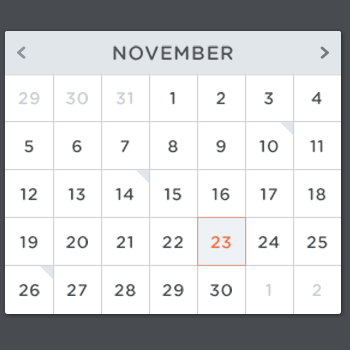
<style>
.page{position:relative;width:350px;height:350px;background:#ffffff}
.page>*{position:absolute;margin:0}
.t1{font:19.2px "GothamRounded-Medium";letter-spacing:0.03em;color:#4d5155;text-transform:uppercase}
.t2{font:16.8px/48px "GothamRounded-Medium";letter-spacing:0.03em;color:#4d5155;text-transform:uppercase}
.t3{font:16.8px/48px "GothamRounded-Medium";letter-spacing:0.03em;color:#cccfd3;text-transform:uppercase}
.t4{font:16.8px/48px "GothamRounded-Medium";letter-spacing:0.03em;color:#ef733c;text-transform:uppercase}
</style>
<div class="page">
<p class="t1" style="left:113px;top:45px;width:120px;height:16px">November</p>
<p class="t2" style="left:18px;top:92px;width:22px;height:205px;text-align:center"><span class="t3">29<br></span>5<br>12<br>19<br>26</p>
<p class="t2" style="left:66px;top:92px;width:22px;height:204px;text-align:center"><span class="t3">30<br></span>6<br>13<br>20<br>27</p>
<p class="t2" style="left:114px;top:92px;width:22px;height:205px;text-align:center"><span class="t3">31<br></span>7<br>14<br>21<br>28</p>
<p class="t2" style="left:162px;top:92px;width:22px;height:205px;text-align:center">1<br>8<br>15<br>22<br>29</p>
<p class="t2" style="left:210px;top:92px;width:22px;height:205px;text-align:center">2<br>9<br>16<br><span class="t4">23<br></span>30</p>
<p class="t2" style="left:258px;top:92px;width:22px;height:204px;text-align:center">3<br>10<br>17<br>24<br><span class="t3">1</span></p>
<p class="t2" style="left:306px;top:92px;width:22px;height:204px;text-align:center">4<br>11<br>18<br>25<br><span class="t3">2</span></p>
</div>
